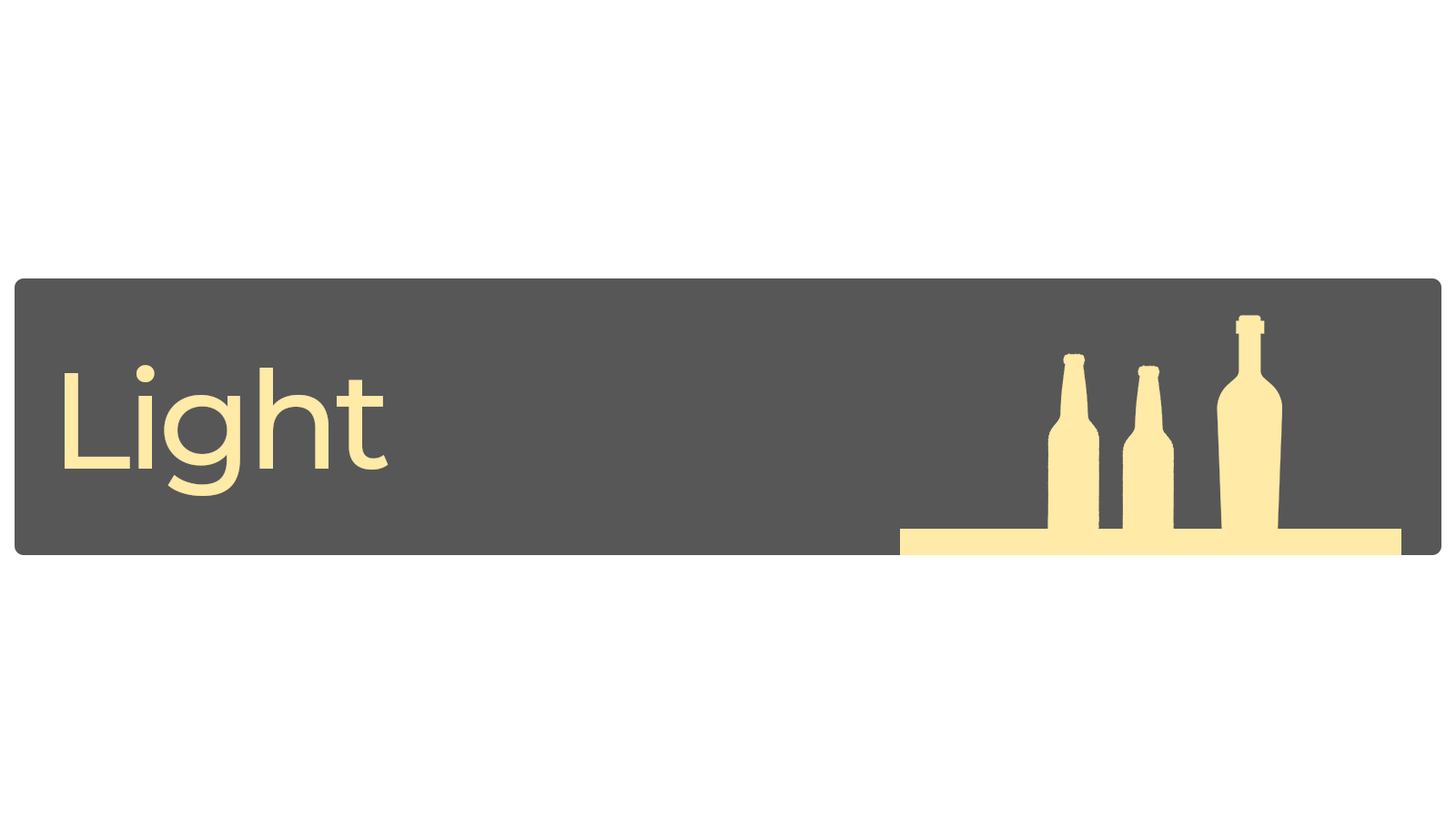
<style>
.page{position:relative;width:1456px;height:819px;background:#ffffff}
.page>*{position:absolute;margin:0}
.t1{font:136.5px "Montserrat-Medium";letter-spacing:-0.04em;color:#ffeaa7}
</style>
<div class="page">
<p class="t1" style="left:65px;top:365px;width:324px;height:131px">Light</p>
</div>
